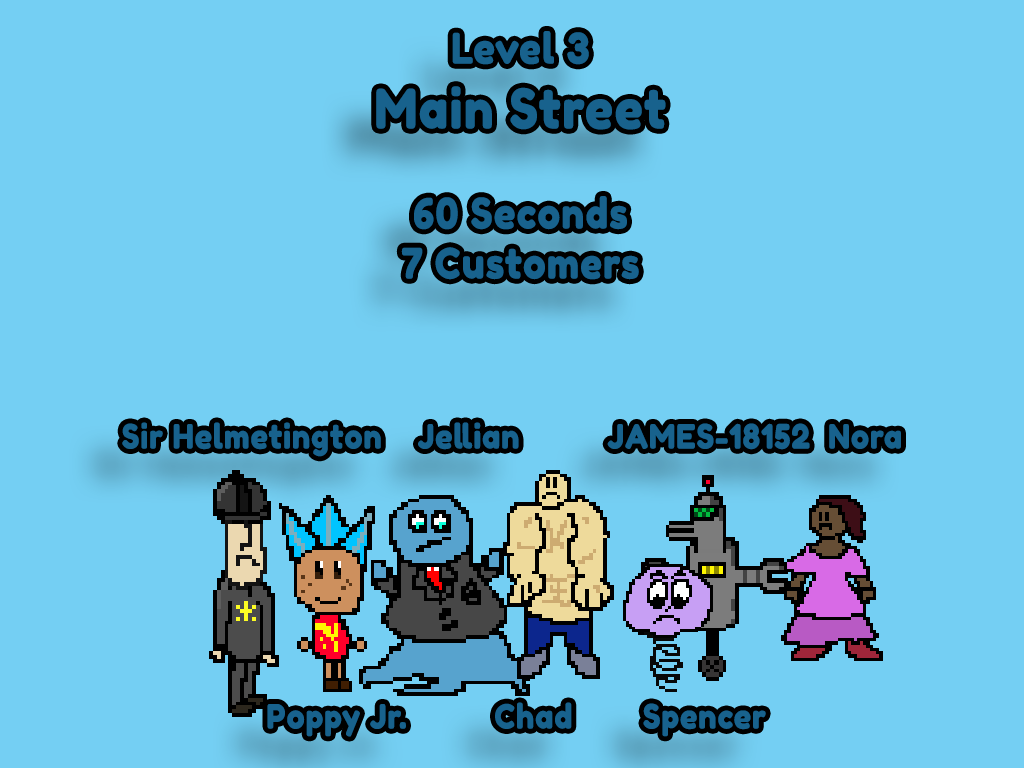
<style>
.page{position:relative;width:1024px;height:768px;background:#74cff3}
.page>*{position:absolute;margin:0}
.t1{font:33.3px "FredokaOne-Regular";letter-spacing:0.01em;color:#18628d;font-weight:bold;scale:0.9 1}
.t2{font:41.7px "FredokaOne-Regular";letter-spacing:0.01em;color:#18628d;font-weight:bold;scale:0.9 1}
.t3{font:54.2px "FredokaOne-Regular";letter-spacing:0.01em;color:#18628d;font-weight:bold;scale:0.9 1}
</style>
<div class="page">
<p class="t1" style="left:122px;top:31px;width:779px;height:706px;text-align:center"><span class="t2">Level 3<br></span><span class="t3">Main Street<br></span><span class="t2"><br>60 Seconds<br>7 Customers<br><br></span><br><br>Sir Helmetington    Jellian          JAMES-18152  Nora  <br><br><br><br><br><br><br>Poppy Jr.          Chad        Spencer</p>
</div>
